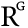
<style>
.page{position:relative;width:28px;height:28px;background:#ffffff}
.page>*{position:absolute;margin:0}
.t1{font:30px "MinionVariableConcept-Roman";letter-spacing:0.075em;color:#000000}
.t2{font:12.5px "MinionVariableConcept-Roman";letter-spacing:0.075em;color:#000000}
</style>
<div class="page">
<p class="t1" style="left:1px;top:6px;width:19px;height:21px">R</p>
<p class="t2" style="left:16px;top:1px;width:9px;height:10px">G</p>
</div>
